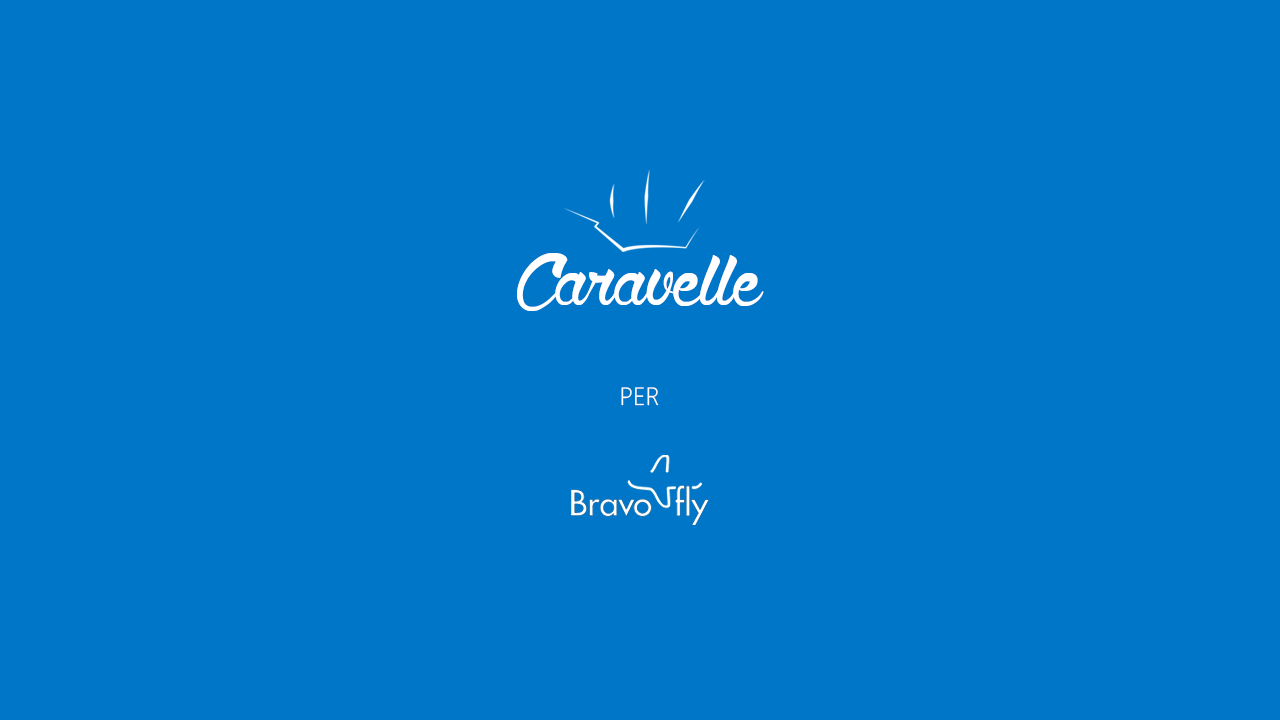
<style>
.page{position:relative;width:1280px;height:720px;background:#0076c9}
.page>*{position:absolute;margin:0}
.t1{font:120px "WolfintheCityLight";color:#ffffff}
.t2{font:25px "SegoeWP-Light";color:#ffffff}
</style>
<div class="page">
<p class="t1" style="left:517px;top:253px;width:247px;height:58px">Caravelle</p>
<p class="t2" style="left:621px;top:387px;width:38px;height:19px">PER</p>
</div>
